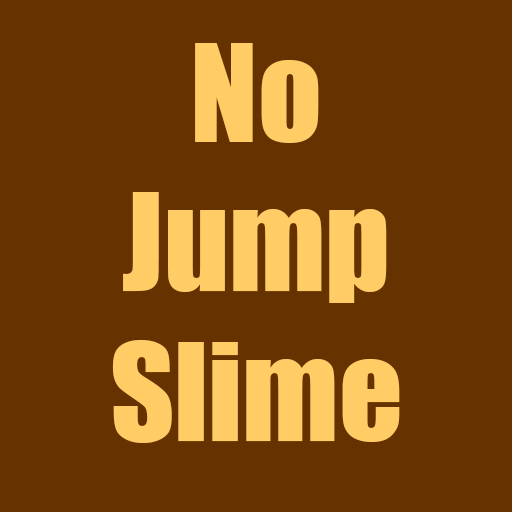
<style>
.page{position:relative;width:512px;height:512px;background:#663300}
.page>*{position:absolute;margin:0}
.t1{font:124.7px "Impact";color:#ffcc66}
</style>
<div class="page">
<p class="t1" style="left:112px;top:43px;width:288px;height:400px;text-align:center">No<br>Jump<br>Slime</p>
</div>
